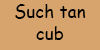
<style>
.page{position:relative;width:100px;height:50px;background:#d7a46d}
.page>*{position:absolute;margin:0}
.t1{font:18px "ComicSansMS";color:#000000;scale:0.97 1}
</style>
<div class="page">
<p class="t1" style="left:15px;top:4px;width:71px;height:36px;text-align:center">Such tan<br>cub</p>
</div>
